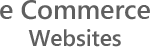
<style>
.page{position:relative;width:150px;height:47px;background:#ffffff}
.page>*{position:absolute;margin:0}
.t1{font:26.6px "SegoeWPN-Semibold";color:#5f5f5f}
.t2{font:22.6px "SegoeWPN-Semibold";color:#5f5f5f}
</style>
<div class="page">
<p class="t1" style="left:0px;top:0px;width:150px;height:47px;text-align:center">e Commerce<br><span class="t2">Websites</span></p>
</div>
